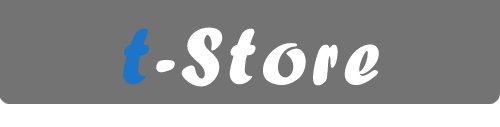
<style>
.page{position:relative;width:500px;height:127px;background:#737373}
.page>*{position:absolute;margin:0}
.t1{font:85px "ForteMT";letter-spacing:0.05em;color:#ffffff}
.t2{font:85px "ForteMT";letter-spacing:0.05em;color:#1c75c9}
</style>
<div class="page">
<p class="t1" style="left:123px;top:27px;width:256px;height:60px"><span class="t2">t</span>-Store</p>
</div>
